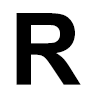
<style>
.page{position:relative;width:96px;height:96px;background:#ffffff}
.page>*{position:absolute;margin:0}
.t1{font:100px "Arial-BoldMT";color:#000000}
</style>
<div class="page">
<p class="t1" style="left:16px;top:13px;width:65px;height:72px">R</p>
</div>
